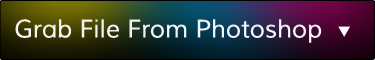
<style>
.page{position:relative;width:375px;height:60px}
.page>*{position:absolute;margin:0}
.t1{font:25px "Muli";color:#fefefe}
</style>
<div class="page">
<p class="t1" style="left:15px;top:19px;width:307px;height:24px">Grab File From Photoshop</p>
</div>
